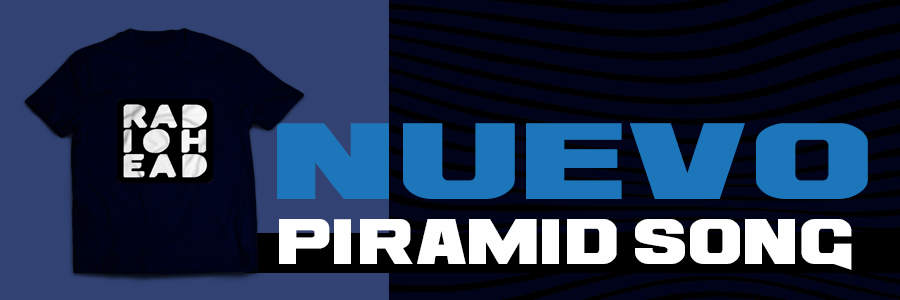
<style>
.page{position:relative;width:900px;height:300px;background:#000319}
.page>*{position:absolute;margin:0}
.t1{font:84.1px "Ash";color:#1e76ba;scale:1.33 1}
.t2{font:50px "Ash";color:#fffefe}
</style>
<div class="page">
<p class="t1" style="left:277px;top:123px;width:591px;height:76px">nuevo</p>
<p class="t2" style="left:279px;top:219px;width:573px;height:51px">piramid song</p>
</div>
